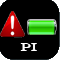
<style>
.page{position:relative;width:60px;height:60px;background:#000000}
.page>*{position:absolute;margin:0}
.t1{font:12px "EngraversMT";color:#ffffff}
</style>
<div class="page">
<p class="t1" style="left:20px;top:43px;width:17px;height:8px">PI</p>
</div>
